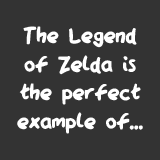
<style>
.page{position:relative;width:160px;height:160px;background:#333333}
.page>*{position:absolute;margin:0}
.t1{font:23.9px "QAReports";color:#ffffff}
</style>
<div class="page">
<p class="t1" style="left:17px;top:26px;width:126px;height:108px;text-align:center">The Legend<br>of Zelda is<br>the perfect<br>example of...</p>
</div>
